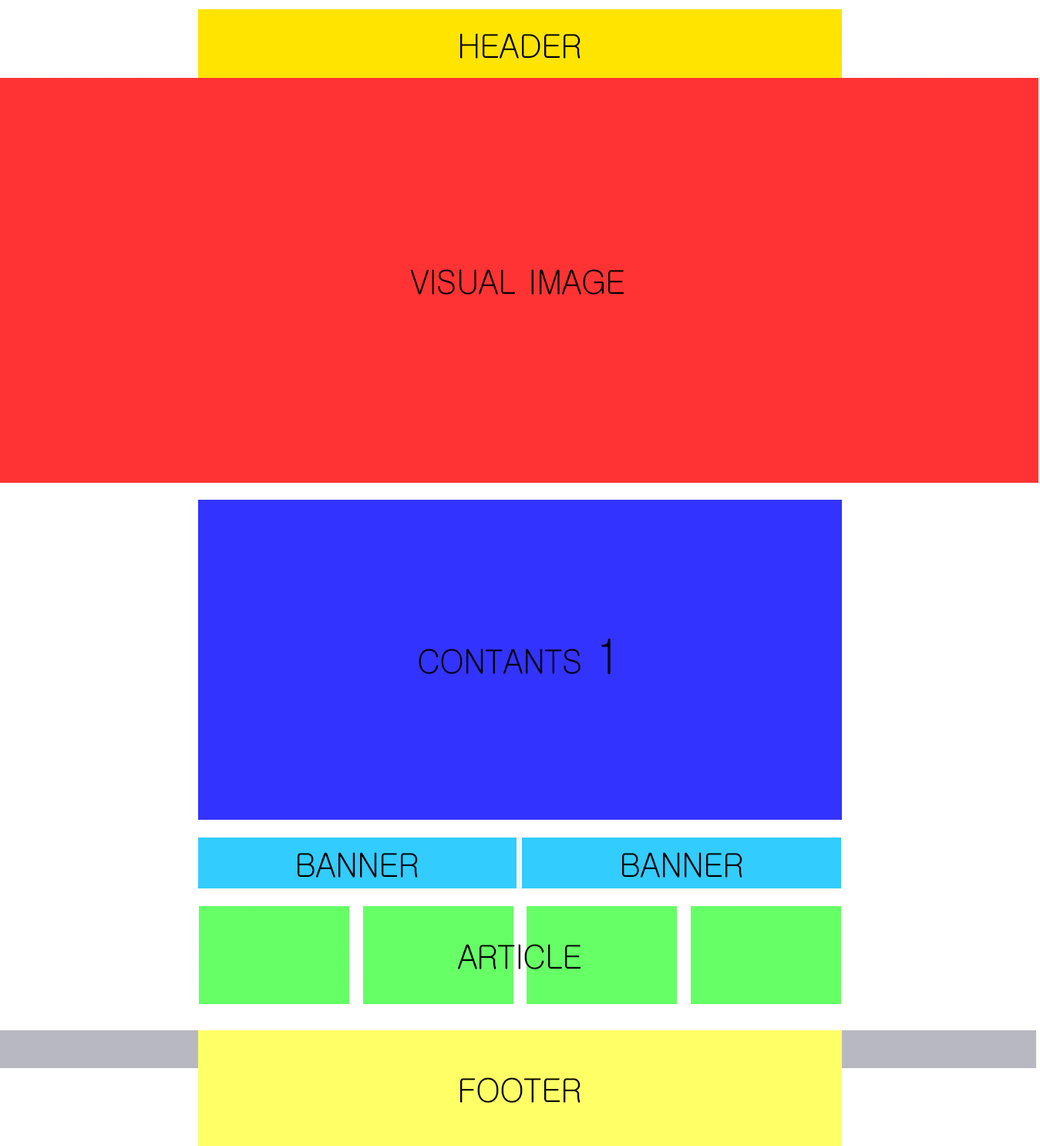
<style>
.page{position:relative;width:1040px;height:1146px;background:#ff3333}
.page>*{position:absolute;margin:0}
.t1{font:47.1px "Gulim";letter-spacing:-0.025em;color:#000000;font-variant:small-caps;scale:0.97 1}
</style>
<div class="page">
<p class="t1" style="left:460px;top:33px;width:121px;height:26px">header</p>
<p class="t1" style="left:410px;top:269px;width:215px;height:26px">visual image</p>
<p class="t1" style="left:419px;top:639px;width:192px;height:36px">contants 1</p>
<p class="t1" style="left:298px;top:852px;width:120px;height:26px">banner</p>
<p class="t1" style="left:622px;top:852px;width:121px;height:26px">banner</p>
<p class="t1" style="left:458px;top:944px;width:124px;height:25px">article</p>
<p class="t1" style="left:460px;top:1077px;width:121px;height:26px">footer</p>
</div>
